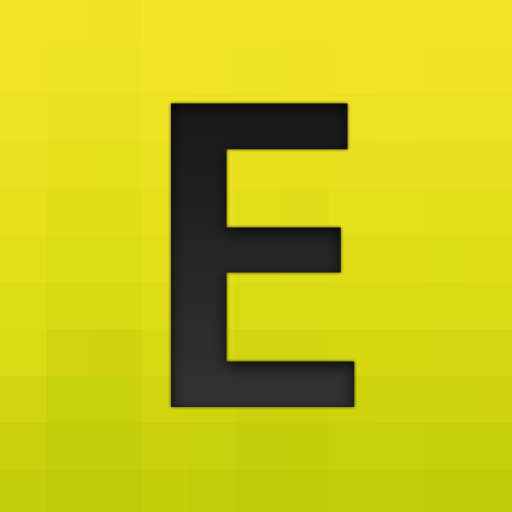
<style>
.page{position:relative;width:512px;height:512px}
.page>*{position:absolute;margin:0}
.t1{font:450px "MyriadPro-Semibold";color:#222222}
</style>
<div class="page">
<p class="t1" style="left:171px;top:103px;width:184px;height:304px">E</p>
</div>
